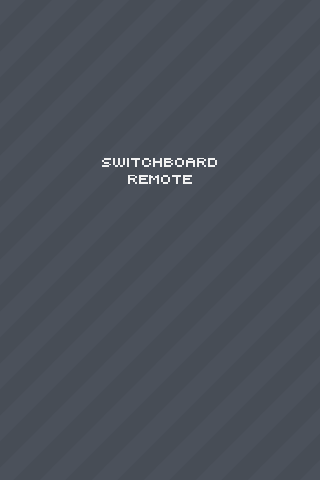
<style>
.page{position:relative;width:320px;height:480px;background:#474d56}
.page>*{position:absolute;margin:0}
.t1{font:14px "automat";color:#f1f1f1}
</style>
<div class="page">
<p class="t1" style="left:102px;top:158px;width:115px;height:26px;text-align:center">SWITCHBOARD<br>REMOTE</p>
</div>
